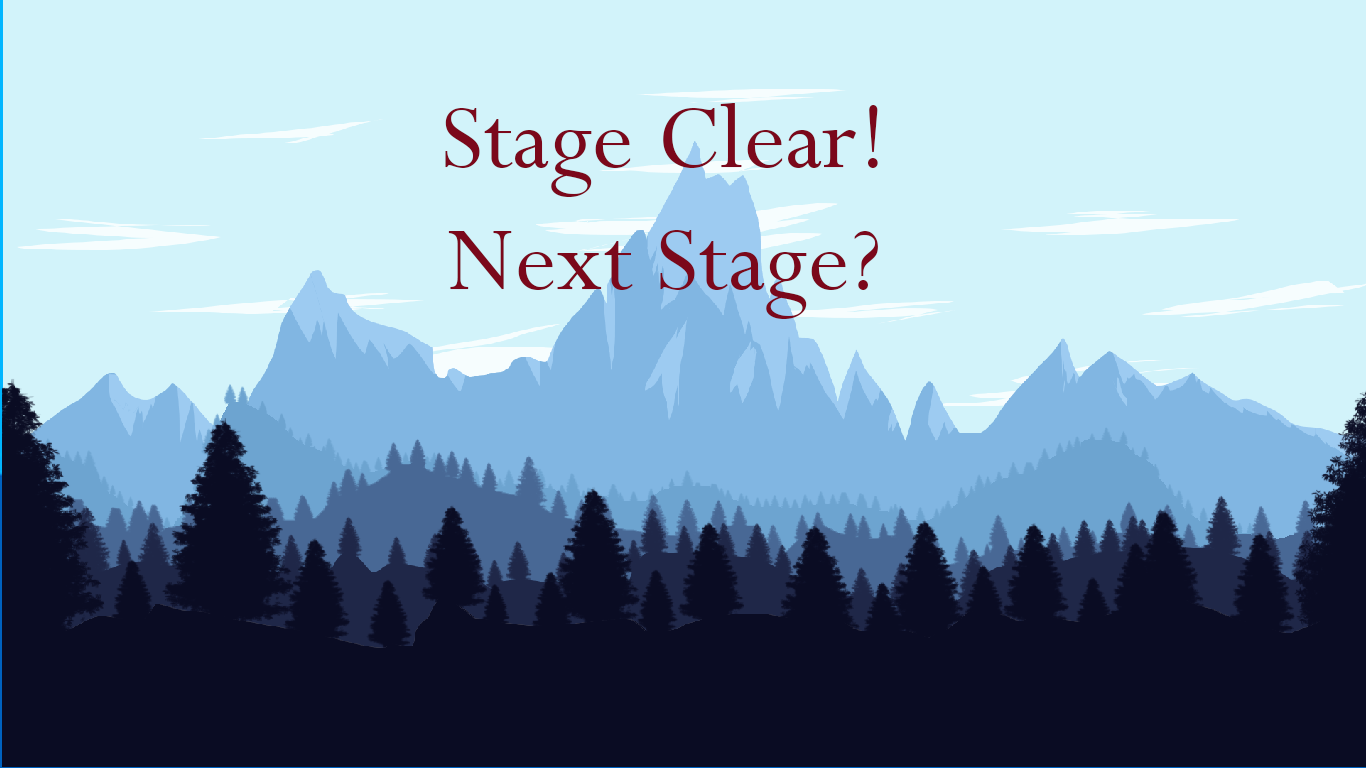
<style>
.page{position:relative;width:1366px;height:768px;background:#d2f3fa}
.page>*{position:absolute;margin:0}
.t1{font:102px "Perpetua";color:#7b081b}
</style>
<div class="page">
<p class="t1" style="left:445px;top:103px;width:433px;height:216px;text-align:center">Stage Clear!<br>Next Stage?</p>
</div>
